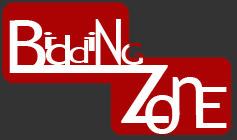
<style>
.page{position:relative;width:237px;height:140px;background:#333333}
.page>*{position:absolute;margin:0}
.t1{font:74px "TrebuchetMS";color:#fefefe;scale:1.07 1}
.t2{font:64.1px "TrebuchetMS";color:#fefefe;scale:0.79 1}
.t3{font:23.4px "TrebuchetMS";color:#fefefe;scale:2.9 1}
.t4{font:40.5px "TrebuchetMS";color:#fefefe;scale:1.3 1}
.t5{font:31.1px "TrebuchetMS";color:#fefefe;scale:1.38 1}
.t6{font:25.8px "TrebuchetMS";color:#fefefe;scale:2.42 1}
.t7{font:30.6px "TrebuchetMS";scale:1.25 1}
.t8{font:81.1px "TrebuchetMS";color:#fefefe;scale:1.29 1}
.t9{font:71.8px "TrebuchetMS";color:#fefefe}
.t10{font:58.1px "TrebuchetMS";color:#fefefe;scale:1.22 1}
</style>
<div class="page">
<p class="t1" style="left:9px;top:20px;width:37px;height:53px">B</p>
<p class="t2" style="left:95px;top:19px;width:26px;height:47px">N</p>
<p class="t3" style="left:44px;top:32px;width:13px;height:17px;rotate:180deg">i</p>
<p class="t4" style="left:45px;top:35px;width:25px;height:30px">d</p>
<p class="t5" style="left:68px;top:40px;width:21px;height:23px">d</p>
<p class="t6" style="left:84px;top:32px;width:12px;height:19px">i</p>
<p class="t7" style="left:121px;top:43px;width:22px;height:22px">G</p>
<p class="t8" style="left:121px;top:65px;width:48px;height:58px">Z</p>
<p class="t9" style="left:172px;top:77px;width:31px;height:38px">n</p>
<p class="t10" style="left:196px;top:87px;width:31px;height:41px">E</p>
<p class="t9" style="left:145px;top:95px;width:35px;height:39px">o</p>
</div>
